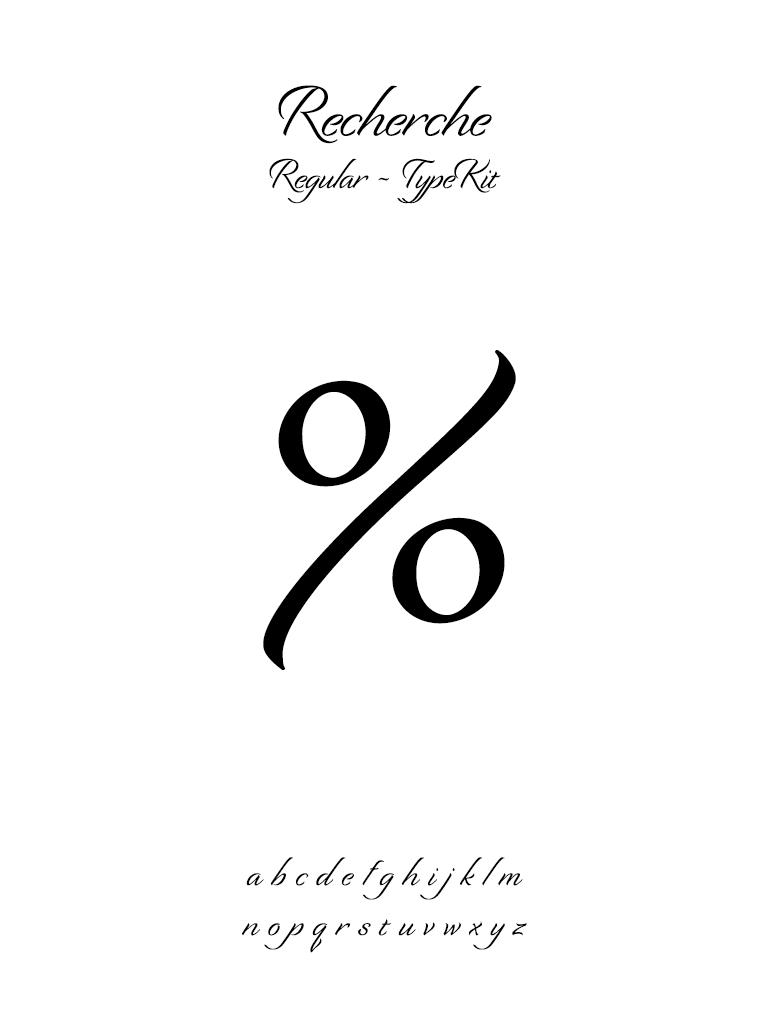
<style>
.page{position:relative;width:768px;height:1024px;background:#ffffff}
.page>*{position:absolute;margin:0}
.t1{font:43.7px "Recherche";color:#000000}
.t2{font:74.9px "Recherche";color:#000000}
.t3{font:651.2px "Recherche";color:#000000}
.t4{font:41.7px "Recherche";color:#000000}
</style>
<div class="page">
<p class="t1" style="left:269px;top:85px;width:232px;height:119px;text-align:center"><span class="t2">Recherche<br></span>Regular - TypeKit</p>
<p class="t3" style="left:263px;top:350px;width:253px;height:320px">%</p>
<p class="t4" style="left:242px;top:857px;width:285px;height:96px;text-align:center">a b c d e f g h i j k l m<br>n o p q r s t u v w x y z</p>
</div>
